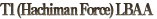
<style>
.page{position:relative;width:157px;height:19px;background:#ffffff}
.page>*{position:absolute;margin:0}
.t1{font:16px "RyuminPro-ExBold";letter-spacing:-0.12em;color:#4a3f32;font-weight:bold;scale:0.85 1}
</style>
<div class="page">
<p class="t1" style="left:0px;top:3px;width:154px;height:16px">T1 (Hachiman Force) LBAA</p>
</div>
